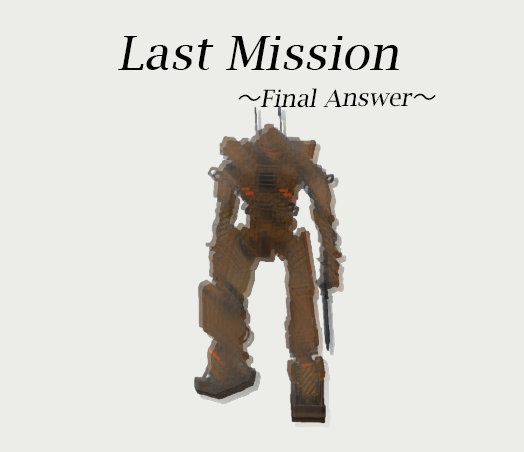
<style>
.page{position:relative;width:524px;height:452px;background:#ecece8}
.page>*{position:absolute;margin:0}
.t1{font:46.8px "LucidaBright";color:#000000;font-style:italic}
.t2{font:24px "LucidaBright";color:#000000;font-style:italic}
.t3{font:24px "KozGoPr6N-Regular";color:#000000;font-style:italic}
</style>
<div class="page">
<p class="t1" style="left:118px;top:36px;width:281px;height:34px">Last Mission</p>
<p class="t2" style="left:238px;top:88px;width:198px;height:20px"><span class="t3">～</span>Final Answer<span class="t3">～</span></p>
</div>
